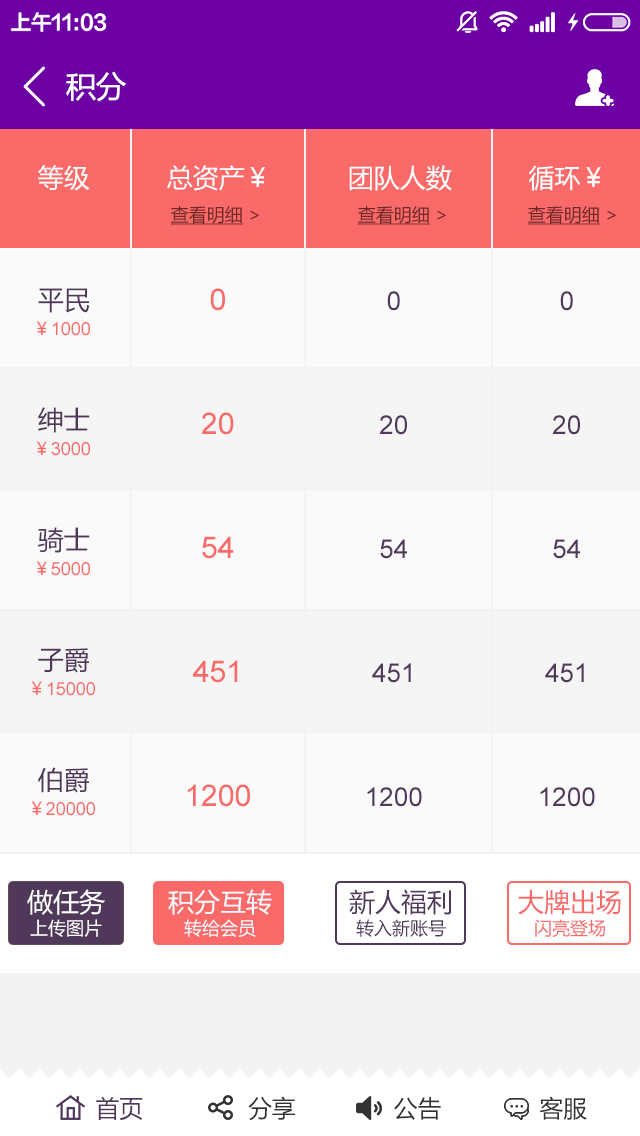
<style>
.page{position:relative;width:640px;height:1136px;background:#fafafa}
.page>*{position:absolute;margin:0}
.t1{font:30px "MicrosoftYaHei";color:#ffffff}
.t2{font:26px "MicrosoftYaHei";color:#ffffff}
.t3{font:18px "MicrosoftYaHei";color:#6f2928;text-decoration:underline}
.t4{font:18px "MicrosoftYaHei";color:#6f2928}
.t5{font:26px/60px "MicrosoftYaHei";color:#50385b}
.t6{font:30px/62px "ArialMT";color:#f96a69}
.t7{font:26px/62px "ArialMT";color:#50385b}
.t8{font:18px/60px "ArialMT";color:#f96a69}
.t9{font:18px/60px "MicrosoftYaHei";color:#f96a69}
.t10{font:18px/30px "MicrosoftYaHei";color:#ffffff}
.t11{font:26px/30px "MicrosoftYaHei";color:#ffffff}
.t12{font:26px/30px "MicrosoftYaHei";color:#f5fbff}
.t13{font:18px/30px "MicrosoftYaHei";color:#f5fbff}
.t14{font:18px/30px "MicrosoftYaHei";color:#50385b}
.t15{font:26px/30px "MicrosoftYaHei";color:#50385b}
.t16{font:26px/30px "MicrosoftYaHei";color:#f96a69}
.t17{font:18px/30px "MicrosoftYaHei";color:#f96a69}
.t18{font:24px "MicrosoftYaHei";color:#333333}
.t19{font:24px "MicrosoftYaHei";color:#50385b}
</style>
<div class="page">
<p class="t1" style="left:66px;top:71px;width:60px;height:31px">积分</p>
<p class="t2" style="left:38px;top:165px;width:563px;height:26px">等级          总资产￥          团队人数          循环￥</p>
<p class="t3" style="left:170px;top:206px;width:89px;height:19px">查看明细<span class="t4"> &gt;</span></p>
<p class="t3" style="left:357px;top:206px;width:89px;height:19px">查看明细<span class="t4"> &gt;</span></p>
<p class="t3" style="left:527px;top:206px;width:89px;height:19px">查看明细<span class="t4"> &gt;</span></p>
<p class="t5" style="left:38px;top:288px;width:52px;height:505px">平民<br><br>绅士<br><br>骑士 <br><br>子爵<br><br>伯爵</p>
<p class="t6" style="left:187px;top:288px;width:63px;height:519px;text-align:center">0<br><br>20<br><br>54<br><br>451<br><br>1200</p>
<p class="t7" style="left:367px;top:291px;width:55px;height:516px;text-align:center">0<br><br>20<br><br>54<br><br>451<br><br>1200</p>
<p class="t7" style="left:540px;top:291px;width:55px;height:516px;text-align:center">0<br><br>20<br><br>54<br><br>451<br><br>1200</p>
<p class="t8" style="left:31px;top:321px;width:64px;height:495px;text-align:center"><span class="t9">￥</span>1000<br><br><span class="t9">￥</span>3000<br><br><span class="t9">￥</span>5000<br><br><span class="t9">￥</span>15000<br><span class="t9"><br>￥</span>20000</p>
<p class="t10" style="left:27px;top:889px;width:78px;height:48px;text-align:center"><span class="t11">做任务<br></span>上传图片</p>
<p class="t12" style="left:168px;top:889px;width:104px;height:48px;text-align:center">积分互转<br><span class="t13">转给会员</span></p>
<p class="t14" style="left:349px;top:889px;width:102px;height:48px;text-align:center"><span class="t15">新人福利<br></span>转入新账号</p>
<p class="t16" style="left:518px;top:889px;width:103px;height:48px;text-align:center">大牌出场<br><span class="t17">闪亮登场</span></p>
<p class="t18" style="left:96px;top:1096px;width:491px;height:25px"><span class="t19">首页</span>               分享              公告              客服</p>
</div>
